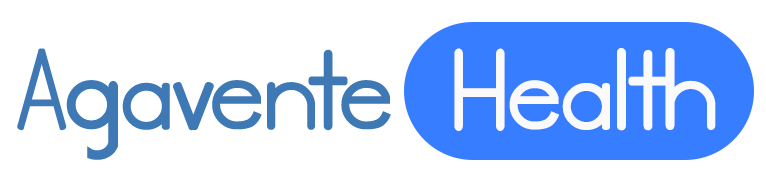
<style>
.page{position:relative;width:766px;height:182px;background:#ffffff}
.page>*{position:absolute;margin:0}
.t1{font:100px "WolfRubeusDemoSans";color:#3f79b5}
.t2{font:100px "WolfRubeusDemoSans";color:#fafafa}
</style>
<div class="page">
<p class="t1" style="left:17px;top:48px;width:374px;height:112px">Agavente</p>
<p class="t2" style="left:454px;top:48px;width:262px;height:83px">Health</p>
</div>
